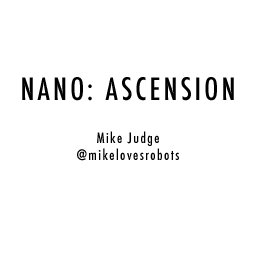
<style>
.page{position:relative;width:256px;height:256px;background:#ffffff}
.page>*{position:absolute;margin:0}
.t1{font:30px "Futura-CondensedMedium";letter-spacing:0.1em;color:#000000}
.t2{font:14px "Futura-CondensedMedium";letter-spacing:0.1em;color:#000000}
</style>
<div class="page">
<p class="t1" style="left:22px;top:77px;width:212px;height:24px">NANO: ASCENSION</p>
<p class="t2" style="left:77px;top:131px;width:102px;height:30px;text-align:center">Mike Judge<br>@mikelovesrobots</p>
</div>
